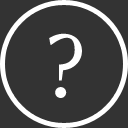
<style>
.page{position:relative;width:128px;height:128px;background:#333333}
.page>*{position:absolute;margin:0}
.t1{font:100px "SitkaBanner";color:#ffffff}
</style>
<div class="page">
<p class="t1" style="left:49px;top:33px;width:33px;height:65px">?</p>
</div>
